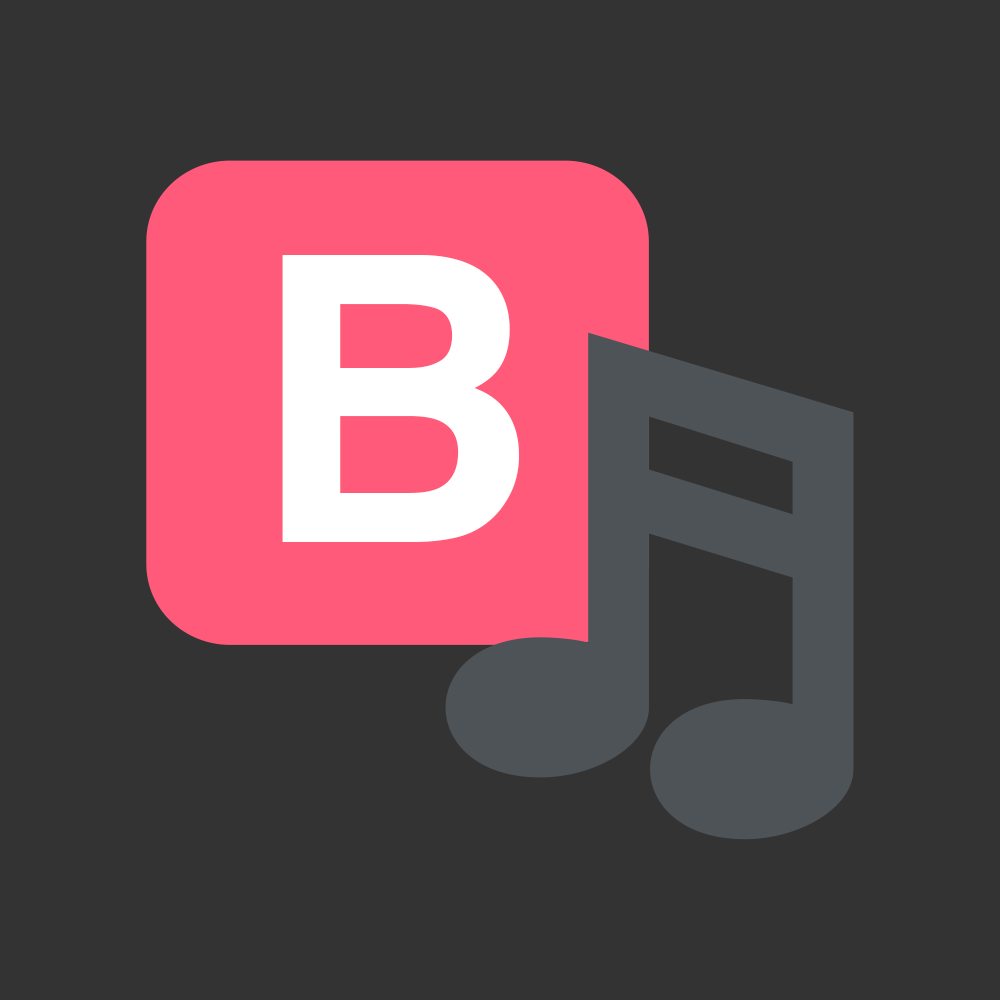
<style>
.page{position:relative;width:1000px;height:1000px;background:#333333}
.page>*{position:absolute;margin:0}
.t1{font:398.7px "Helvetica-Bold";letter-spacing:-0.03em;color:#ffffff}
</style>
<div class="page">
<p class="t1" style="left:282px;top:255px;width:237px;height:287px">B</p>
</div>
